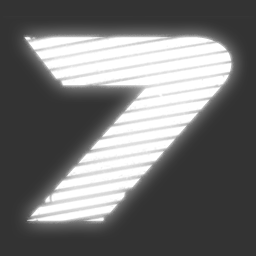
<style>
.page{position:relative;width:256px;height:256px;background:#333333}
.page>*{position:absolute;margin:0}
.t1{font:254.7px "Ethnocentric";letter-spacing:0.05em;color:#ffffff}
</style>
<div class="page">
<p class="t1" style="left:24px;top:37px;width:208px;height:184px">7</p>
</div>
